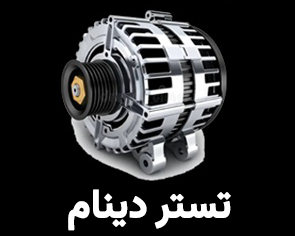
<style>
.page{position:relative;width:295px;height:236px;background:#000000}
.page>*{position:absolute;margin:0}
.t1{font:39.8px "Vazirmatn-Bold";letter-spacing:-0.01em;color:#ffffff;font-weight:bold;scale:0.94 1}
</style>
<div class="page">
<p class="t1" style="left:68px;top:189px;width:163px;height:42px">تستر دینام</p>
</div>
